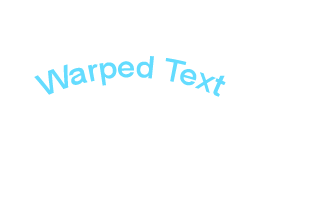
<style>
.page{position:relative;width:320px;height:224px;background:#ffffff}
.page>*{position:absolute;margin:0}
.t1{font:30px "ArialMT";color:#64dcff}
</style>
<div class="page">
<p class="t1" style="left:34px;top:56px;width:192px;height:41px">Warped Text</p>
</div>
